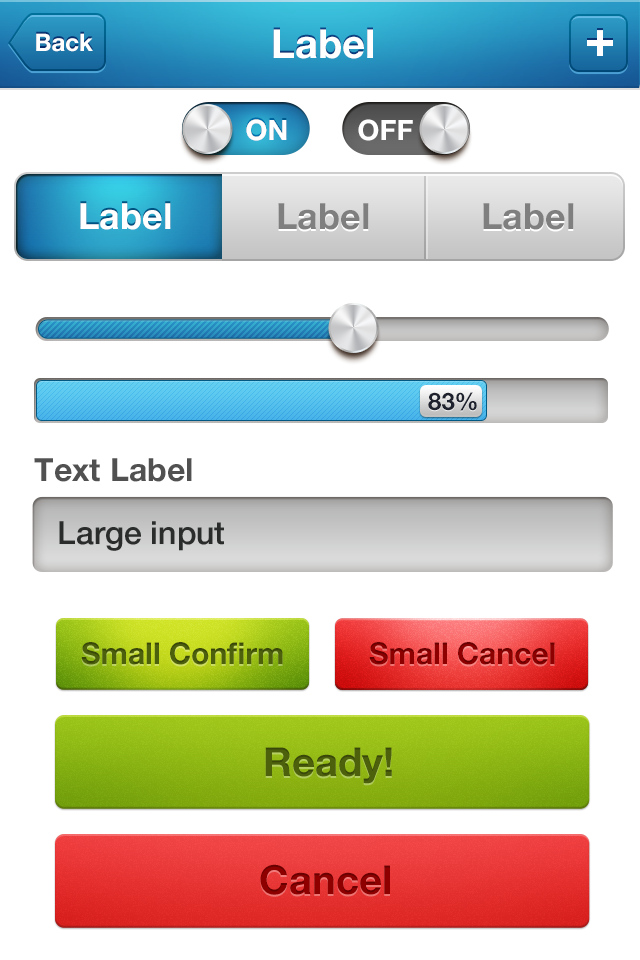
<style>
.page{position:relative;width:640px;height:960px;background:#ffffff}
.page>*{position:absolute;margin:0}
.t1{font:40px "HelveticaNeueLTStd-Bd";color:#ffffff}
.t2{font:24px "HelveticaNeue-Bold";color:#ffffff}
.t3{font:28px "HelveticaNeueLTStd-Bd";color:#fffefe}
.t4{font:28px "HelveticaNeueLTStd-Bd";color:#ffffff}
.t5{font:36px "HelveticaNeue-Bold";color:#ffffff}
.t6{font:36px "HelveticaNeue-Bold";color:#7f7f7f}
.t7{font:24px "HelveticaNeueLTStd-Bd";color:#1d222e}
.t8{font:32px "HelveticaNeueLTStd-Bd";color:#515151}
.t9{font:32px "HelveticaNeueLTStd-Md";color:#2a2b2b}
.t10{font:30px "HelveticaNeueLTStd-Bd";color:#4d610d}
.t11{font:30px "HelveticaNeueLTStd-Bd";color:#8e0000}
.t12{font:40px "HelveticaNeueLTStd-Bd";color:#4d610d}
.t13{font:40px "HelveticaNeueLTStd-Bd";color:#8e0000}
</style>
<div class="page">
<p class="t1" style="left:273px;top:29px;width:100px;height:30px">Label</p>
<p class="t2" style="left:36px;top:33px;width:57px;height:19px">Back</p>
<p class="t3" style="left:246px;top:119px;width:41px;height:22px">ON</p>
<p class="t4" style="left:358px;top:119px;width:55px;height:22px">OFF</p>
<p class="t5" style="left:80px;top:203px;width:91px;height:27px">Label</p>
<p class="t6" style="left:278px;top:203px;width:91px;height:27px">Label</p>
<p class="t6" style="left:483px;top:203px;width:91px;height:27px">Label</p>
<p class="t7" style="left:428px;top:392px;width:49px;height:19px">83%</p>
<p class="t8" style="left:34px;top:458px;width:158px;height:24px">Text Label</p>
<p class="t9" style="left:59px;top:521px;width:165px;height:30px">Large input</p>
<p class="t10" style="left:81px;top:642px;width:202px;height:23px">Small Confirm</p>
<p class="t11" style="left:369px;top:642px;width:186px;height:23px">Small Cancel</p>
<p class="t12" style="left:265px;top:747px;width:127px;height:37px">Ready!</p>
<p class="t13" style="left:260px;top:864px;width:130px;height:31px">Cancel</p>
</div>
